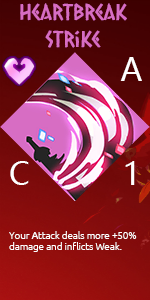
<style>
.page{position:relative;width:150px;height:300px}
.page>*{position:absolute;margin:0}
.t1{font:22.2px "CaesarDressing";color:#d76dc4}
.t2{font:30.6px "MicrosoftYaHei";color:#ffffff}
.t3{font:9.7px "Ubuntu-Light";color:#ffffff}
</style>
<div class="page">
<p class="t1" style="left:20px;top:3px;width:107px;height:45px;text-align:center">Heartbreak<br>Strike</p>
<p class="t2" style="left:120px;top:57px;width:22px;height:24px">A</p>
<p class="t2" style="left:10px;top:161px;width:19px;height:24px">C</p>
<p class="t2" style="left:125px;top:161px;width:10px;height:24px">1</p>
<p class="t3" style="left:9px;top:231px;width:128px;height:21px">Your Attack deals more +50% <br>damage and inflicts Weak.</p>
</div>
